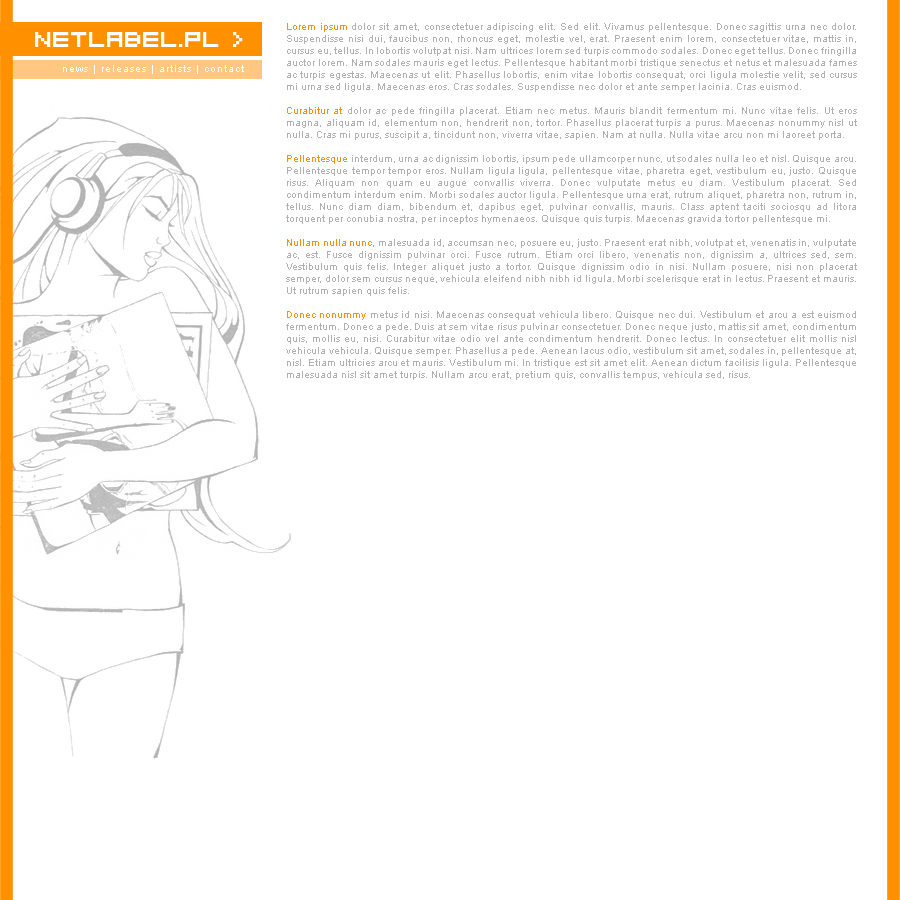
<style>
.page{position:relative;width:900px;height:900px;background:#ffffff}
.page>*{position:absolute;margin:0}
.t1{font:10px "ArialMT";color:#b0b0b0}
.t2{font:10px "ArialMT";color:#ff9000}
.t3{font:24px "04b08";color:#ffffff}
.t4{font:10px "ArialMT";letter-spacing:0.1em;color:#ffffff}
</style>
<div class="page">
<p class="t1" style="left:286px;top:23px;width:571px;height:357px;text-align:justify"><span class="t2">Lorem ipsum</span> dolor sit amet, consectetuer adipiscing elit. Sed elit. Vivamus pellentesque. Donec sagittis urna nec dolor. Suspendisse nisi dui, faucibus non, rhoncus eget, molestie vel, erat. Praesent enim lorem, consectetuer vitae, mattis in, cursus eu, tellus. In lobortis volutpat nisi. Nam ultrices lorem sed turpis commodo sodales. Donec eget tellus. Donec fringilla auctor lorem. Nam sodales mauris eget lectus. Pellentesque habitant morbi tristique senectus et netus et malesuada fames ac turpis egestas. Maecenas ut elit. Phasellus lobortis, enim vitae lobortis consequat, orci ligula molestie velit, sed cursus mi urna sed ligula. Maecenas eros. Cras sodales. Suspendisse nec dolor et ante semper lacinia. Cras euismod.<br><br><span class="t2">Curabitur at</span> dolor ac pede fringilla placerat. Etiam nec metus. Mauris blandit fermentum mi. Nunc vitae felis. Ut eros magna, aliquam id, elementum non, hendrerit non, tortor. Phasellus placerat turpis a purus. Maecenas nonummy nisl ut nulla. Cras mi purus, suscipit a, tincidunt non, viverra vitae, sapien. Nam at nulla. Nulla vitae arcu non mi laoreet porta.<br><br><span class="t2">Pellentesque</span> interdum, urna ac dignissim lobortis, ipsum pede ullamcorper nunc, ut sodales nulla leo et nisl. Quisque arcu. Pellentesque tempor tempor eros. Nullam ligula ligula, pellentesque vitae, pharetra eget, vestibulum eu, justo. Quisque risus. Aliquam non quam eu augue convallis viverra. Donec vulputate metus eu diam. Vestibulum placerat. Sed condimentum interdum enim. Morbi sodales auctor ligula. Pellentesque urna erat, rutrum aliquet, pharetra non, rutrum in, tellus. Nunc diam diam, bibendum et, dapibus eget, pulvinar convallis, mauris. Class aptent taciti sociosqu ad litora torquent per conubia nostra, per inceptos hymenaeos. Quisque quis turpis. Maecenas gravida tortor pellentesque mi.<br><br><span class="t2">Nullam nulla nunc</span>, malesuada id, accumsan nec, posuere eu, justo. Praesent erat nibh, volutpat et, venenatis in, vulputate ac, est. Fusce dignissim pulvinar orci. Fusce rutrum. Etiam orci libero, venenatis non, dignissim a, ultrices sed, sem. Vestibulum quis felis. Integer aliquet justo a tortor. Quisque dignissim odio in nisi. Nullam posuere, nisi non placerat semper, dolor sem cursus neque, vehicula eleifend nibh nibh id ligula. Morbi scelerisque erat in lectus. Praesent et mauris. Ut rutrum sapien quis felis.<br><br><span class="t2">Donec nonummy</span> metus id nisi. Maecenas consequat vehicula libero. Quisque nec dui. Vestibulum et arcu a est euismod fermentum. Donec a pede. Duis at sem vitae risus pulvinar consectetuer. Donec neque justo, mattis sit amet, condimentum quis, mollis eu, nisi. Curabitur vitae odio vel ante condimentum hendrerit. Donec lectus. In consectetuer elit mollis nisl vehicula vehicula. Quisque semper. Phasellus a pede. Aenean lacus odio, vestibulum sit amet, sodales in, pellentesque at, nisl. Etiam ultricies arcu et mauris. Vestibulum mi. In tristique est sit amet elit. Aenean dictum facilisis ligula. Pellentesque malesuada nisl sit amet turpis. Nullam arcu erat, pretium quis, convallis tempus, vehicula sed, risus.</p>
<p class="t3" style="left:35px;top:32px;width:208px;height:15px">netlabel.pl &gt;</p>
<p class="t4" style="left:63px;top:65px;width:181px;height:9px">news | releases | artists | contact</p>
</div>
